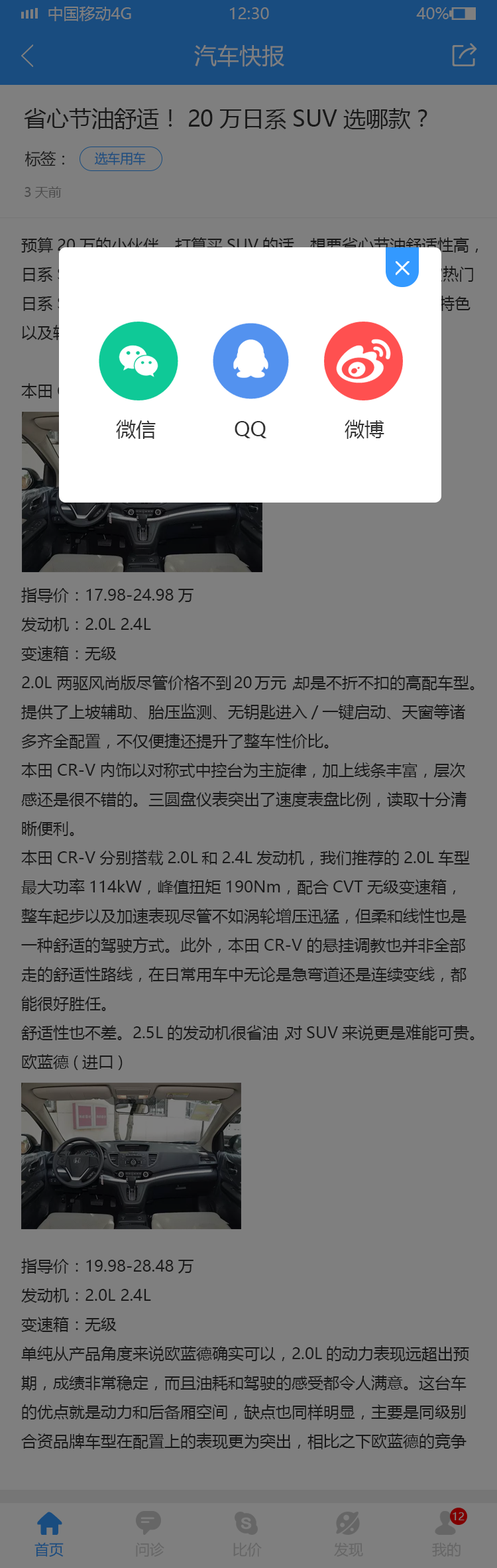
<style>
.page{position:relative;width:497px;height:1568px;background:#7f7f7f}
.page>*{position:absolute;margin:0}
.t1{font:15.9px "MicrosoftYaHei";color:#7f7f7f;text-transform:uppercase}
.t2{font:22.5px "MicrosoftYaHei";color:#7f7f7f}
.t3{font:22.5px "MicrosoftYaHei";color:#191919}
.t4{font:15.9px "MicrosoftYaHei";letter-spacing:-0.04em;color:#191919}
.t5{font:13.3px "MicrosoftYaHei";letter-spacing:-0.04em;color:#194c7f}
.t6{font:13.3px "MicrosoftYaHei";color:#4c4c4c}
.t7{font:15.9px/29.2px "MicrosoftYaHei";color:#191919}
.t8{font:19.9px "MicrosoftYaHei";color:#333333}
.t9{font:10.6px "MicrosoftYaHei";color:#7f7f7f}
.t10{font:14.6px "MicrosoftYaHei";color:#194c7f}
.t11{font:14.6px "MicrosoftYaHei";color:#666666}
</style>
<div class="page">
<p class="t1" style="left:48px;top:6px;width:83px;height:15px">中国移动4G</p>
<p class="t1" style="left:230px;top:7px;width:39px;height:12px">12:30</p>
<p class="t1" style="left:416px;top:7px;width:33px;height:12px">40%</p>
<p class="t2" style="left:194px;top:44px;width:90px;height:23px">汽车快报</p>
<p class="t3" style="left:24px;top:107px;width:404px;height:22px">省心节油舒适！20万日系SUV选哪款？</p>
<p class="t4" style="left:25px;top:151px;width:39px;height:15px">标签：</p>
<p class="t5" style="left:95px;top:152px;width:51px;height:13px">选车用车</p>
<p class="t6" style="left:25px;top:186px;width:37px;height:12px">3天前</p>
<p class="t7" style="left:21px;top:237px;width:458px;height:1212px">预算20万的小伙伴，打算买SUV的话，想要省心节油舒适性高，日系SUV是一个很好的选择方向。接下来，盘点市场上几款热门日系SUV，不仅合资与进口车型都有，并且各自都拥有自身特色以及较高的性价比。<br><br>本田CR-V<br><br><br><br><br><br><br>指导价：17.98-24.98万<br>发动机：2.0L 2.4L<br>变速箱：无级<br>2.0L 两驱风尚版尽管价格不到20万元，却是不折不扣的高配车型。提供了上坡辅助、胎压监测、无钥匙进入/一键启动、天窗等诸多齐全配置，不仅便捷还提升了整车性价比。<br>本田CR-V内饰以对称式中控台为主旋律，加上线条丰富，层次感还是很不错的。三圆盘仪表突出了速度表盘比例，读取十分清晰便利。<br>本田CR-V分别搭载2.0L和2.4L发动机，我们推荐的2.0L车型最大功率114kW，峰值扭矩190Nm，配合CVT无级变速箱，整车起步以及加速表现尽管不如涡轮增压迅猛，但柔和线性也是一种舒适的驾驶方式。此外，本田CR-V的悬挂调教也并非全部走的舒适性路线，在日常用车中无论是急弯道还是连续变线，都能很好胜任。<br>舒适性也不差。2.5L的发动机很省油，对SUV来说更是难能可贵。<br>欧蓝德(进口)<br><br><br><br><br><br><br>指导价：19.98-28.48万<br>发动机：2.0L 2.4L<br>变速箱：无级<br>单纯从产品角度来说欧蓝德确实可以，2.0L的动力表现远超出预期，成绩非常稳定，而且油耗和驾驶的感受都令人满意。这台车的优点就是动力和后备厢空间，缺点也同样明显，主要是同级别合资品牌车型在配置上的表现更为突出，相比之下欧蓝德的竞争力并不是太强。<br><br><br>内饰虽然没有太多新奇的设计，但是质感的呈现上还是具备应有的水平，而且中规中矩也看着也令人舒服。作为一款城市SUV，日常驾驶感觉确实很好。不过三菱这个品牌在国内有些吃不开，这也是导致这台车小众的主要原因。<br><br><br>作者：头条号 / suv之家<br>链接：http://toutiao.com/i6293375858023334402/<br>来源：头条号（今日头条旗下创作平台）<br>著作权归作者所有。商业转载请联系作者获得授权，非商业转载请注明出处。</p>
<p class="t8" style="left:116px;top:420px;width:40px;height:19px">微信</p>
<p class="t8" style="left:235px;top:421px;width:32px;height:17px">QQ</p>
<p class="t8" style="left:345px;top:420px;width:40px;height:19px">微博</p>
<p class="t9" style="left:453px;top:1512px;width:12px;height:8px">12</p>
<p class="t10" style="left:34px;top:1542px;width:30px;height:15px">首页</p>
<p class="t11" style="left:136px;top:1542px;width:28px;height:15px">问诊</p>
<p class="t11" style="left:233px;top:1542px;width:29px;height:15px">比价</p>
<p class="t11" style="left:334px;top:1542px;width:29px;height:15px">发现</p>
<p class="t11" style="left:432px;top:1542px;width:29px;height:15px">我的</p>
</div>
